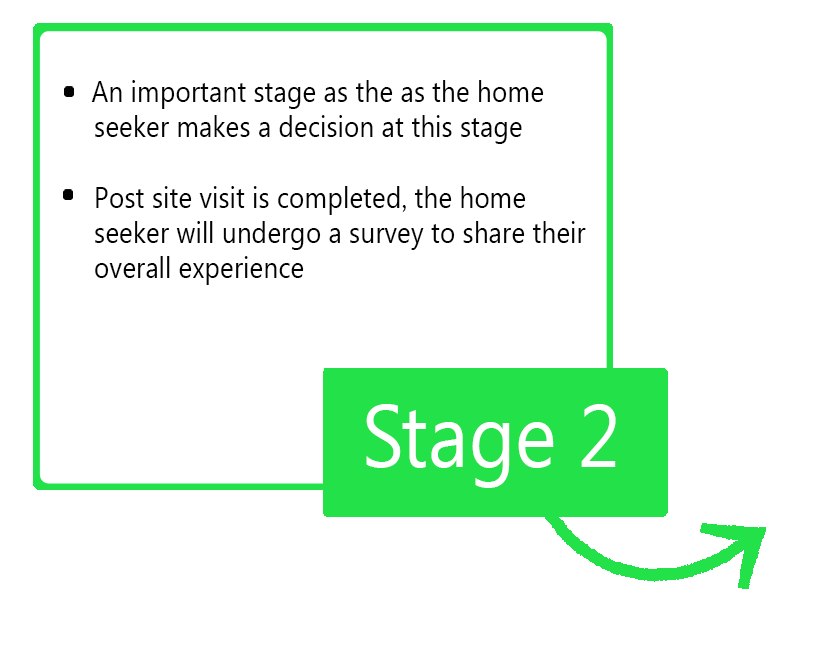
<style>
.page{position:relative;width:836px;height:654px;background:#ffffff}
.page>*{position:absolute;margin:0}
.t1{font:29.3px "SegoeUI";color:#030303;scale:0.9 1}
.t2{font:88px "SegoeUI";color:#ffffff;scale:0.9 1}
</style>
<div class="page">
<p class="t1" style="left:91px;top:80px;width:495px;height:205px">An important stage as the as the home<br> seeker makes a decision at this stage<br><br> Post site visit is completed, the home <br> seeker will undergo a survey to share their<br> overall experience</p>
<p class="t2" style="left:366px;top:404px;width:250px;height:84px">Stage 2</p>
</div>
